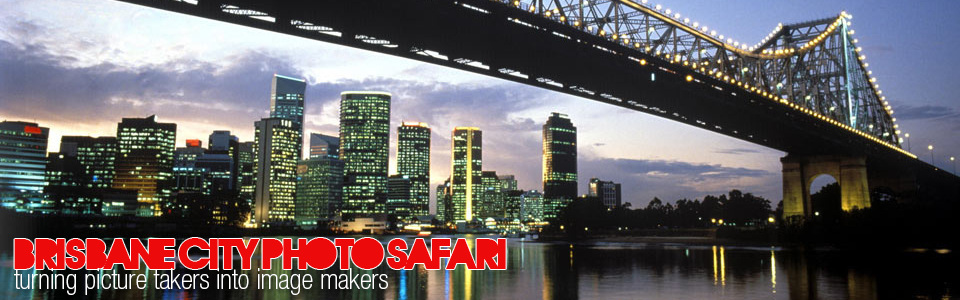
<style>
.page{position:relative;width:960px;height:300px}
.page>*{position:absolute;margin:0}
.t1{font:42.1px "REBOARD";color:#ed0a0a}
.t2{font:28.3px "HelveticaNeueLTStd-ThCn";color:#ffffff}
</style>
<div class="page">
<p class="t1" style="left:14px;top:238px;width:492px;height:31px">Brisbane City Photo Safari</p>
<p class="t2" style="left:14px;top:268px;width:374px;height:27px">turning picture takers into image makers</p>
</div>
